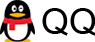
<style>
.page{position:relative;width:95px;height:42px;background:#ffffff}
.page>*{position:absolute;margin:0}
.t1{font:36px "ArialMT";color:#000000}
</style>
<div class="page">
<p class="t1" style="left:42px;top:8px;width:54px;height:28px">QQ</p>
</div>
